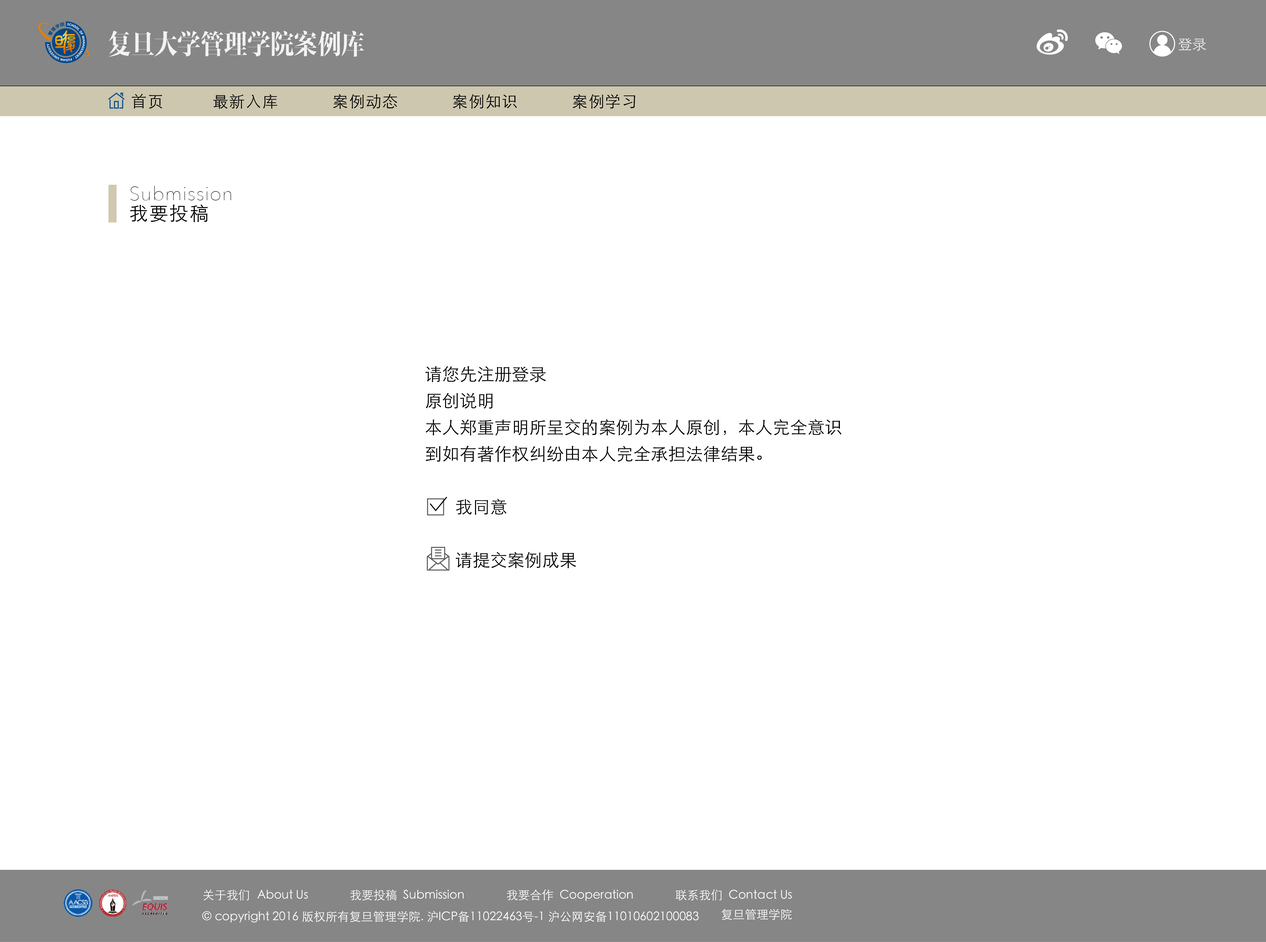
<style>
.page{position:relative;width:1266px;height:942px;background:#ffffff}
.page>*{position:absolute;margin:0}
.t1{font:27.8px "FZFYSJW--GB1-0";letter-spacing:-0.02em;color:#f2f2f2;scale:0.86 1}
.t2{font:14.3px "STXihei";color:#efefef}
.t3{font:15.7px "STHeitiSC-Light";letter-spacing:0.06em;color:#000000}
.t4{font:18.9px/20px "AvenirNext-UltraLight";letter-spacing:0.04em;color:#000000}
.t5{font:18.9px/20px "STHeitiSC-Light";letter-spacing:0.06em;color:#000000}
.t6{font:17.4px/26.6px "STXihei";color:#010101}
.t7{font:11.9px "STXihei";color:#ffffff}
</style>
<div class="page">
<p class="t1" style="left:109px;top:31px;width:255px;height:26px">复旦大学管理学院案例库</p>
<p class="t2" style="left:1179px;top:38px;width:27px;height:13px">登录</p>
<p class="t3" style="left:132px;top:94px;width:30px;height:15px">首页</p>
<p class="t3" style="left:213px;top:94px;width:422px;height:15px">最新入库           案例动态           案例知识           案例学习</p>
<p class="t4" style="left:130px;top:186px;width:101px;height:36px">Submission<br><span class="t5">我要投稿</span></p>
<p class="t6" style="left:425px;top:366px;width:417px;height:202px">请您先注册登录<br>原创说明<br>本人郑重声明所呈交的案例为本人原创，本人完全意识到如有著作权纠纷由本人完全承担法律结果。<br><br>       我同意<br><br>       请提交案例成果</p>
<p class="t7" style="left:203px;top:889px;width:589px;height:12px">关于我们   About Us              我要投稿  Submission              我要合作  Cooperation              联系我们  Contact Us</p>
<p class="t7" style="left:202px;top:911px;width:497px;height:11px">© copyright 2016 版权所有复旦管理学院. 沪ICP备11022463号-1 沪公网安备11010602100083</p>
<p class="t7" style="left:721px;top:909px;width:71px;height:11px">复旦管理学院</p>
</div>
